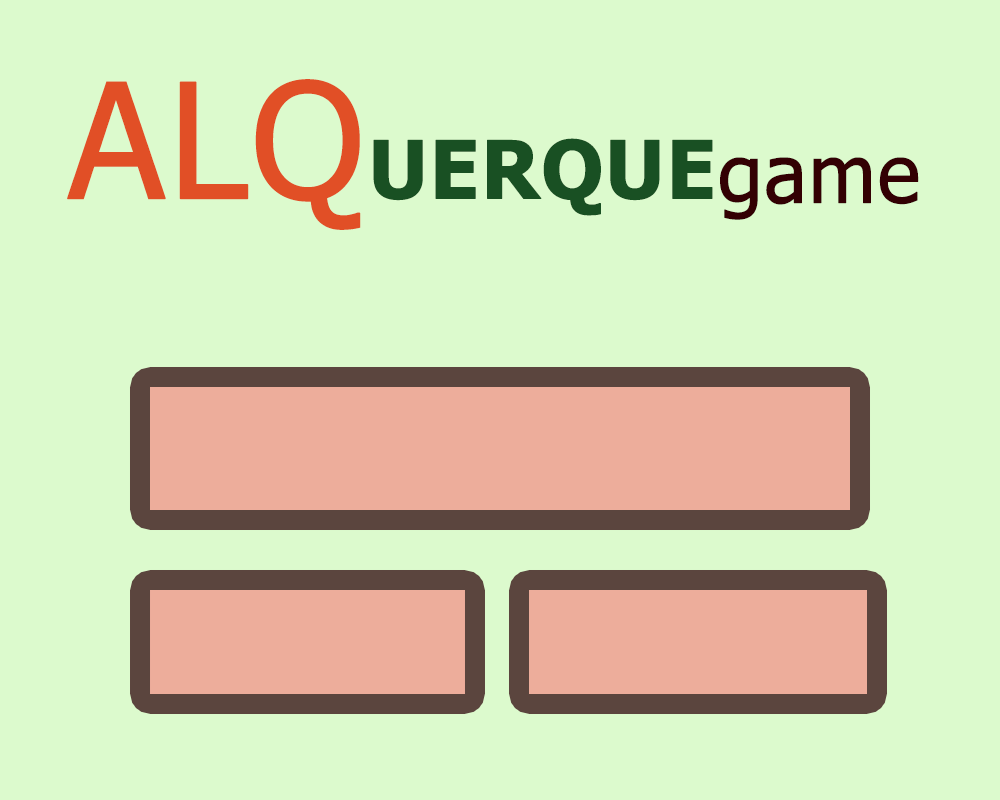
<style>
.page{position:relative;width:1000px;height:800px;background:#dcfacd}
.page>*{position:absolute;margin:0}
.t1{font:80px "Tahoma-Bold";color:#195023;font-weight:bold}
.t2{font:160px "Tahoma";color:#e14f26;font-weight:bold}
.t3{font:80px "Tahoma";color:#330003;font-weight:bold}
</style>
<div class="page">
<p class="t1" style="left:67px;top:79px;width:646px;height:151px"><span class="t2">ALQ</span>UERQUE</p>
<p class="t3" style="left:720px;top:157px;width:199px;height:63px">game</p>
</div>
